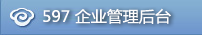
<style>
.page{position:relative;width:202px;height:35px}
.page>*{position:absolute;margin:0}
.t1{font:15.2px "MicrosoftYaHei";color:#fefdfd;scale:1.05 1}
</style>
<div class="page">
<p class="t1" style="left:43px;top:8px;width:128px;height:16px">597 企业管理后台</p>
</div>
